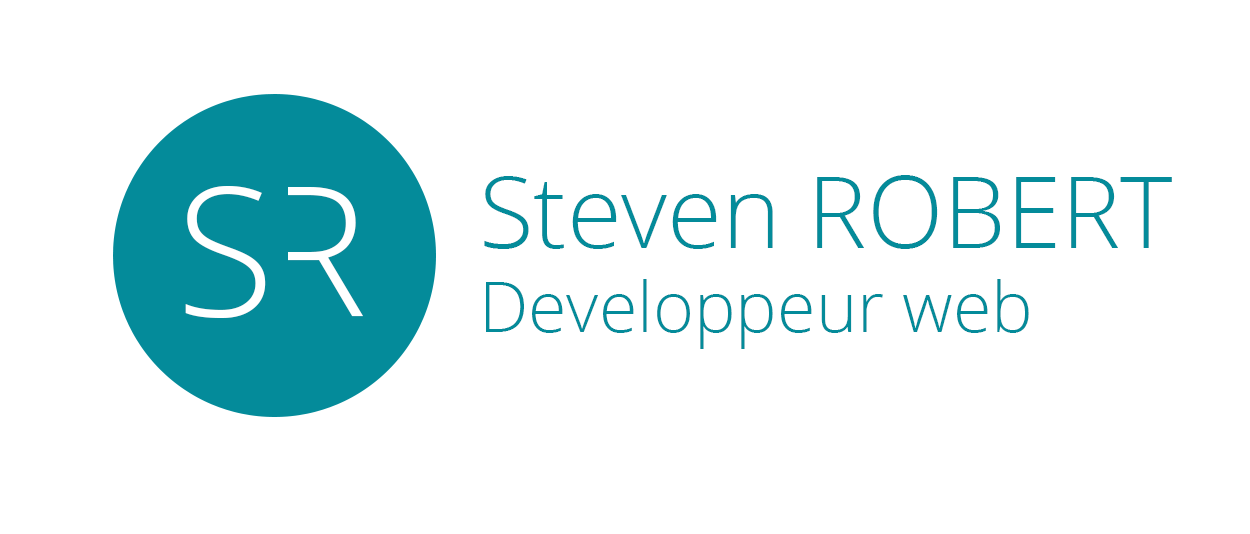
<style>
.page{position:relative;width:1250px;height:534px;background:#ffffff}
.page>*{position:absolute;margin:0}
.t1{font:70px "OpenSans-Light";color:#048b9a}
.t2{font:100px "OpenSans-Light";color:#048b9a}
.t3{font:180px "OpenSans-Light";letter-spacing:-0.08em;color:#ffffff}
</style>
<div class="page">
<p class="t1" style="left:484px;top:175px;width:688px;height:174px"><span class="t2">Steven ROBERT<br></span>Developpeur web</p>
<p class="t3" style="left:185px;top:186px;width:178px;height:132px">SR</p>
</div>
